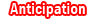
<style>
.page{position:relative;width:96px;height:20px;background:#ffffff}
.page>*{position:absolute;margin:0}
.t1{font:16px "FranklinGothic-MediumCond";letter-spacing:0.025em;color:#ffffff}
</style>
<div class="page">
<p class="t1" style="left:10px;top:3px;width:75px;height:14px">Anticipation</p>
</div>
